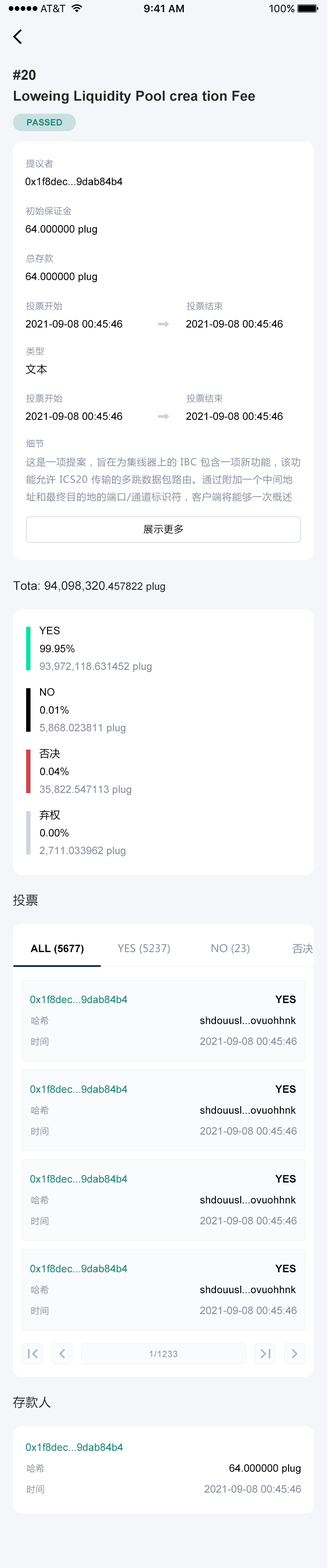
<style>
.page{position:relative;width:327px;height:1568px;background:#ffffff}
.page>*{position:absolute;margin:0}
.t1{font:13.9px/20.9px "Arial-BoldMT";color:#272727}
.t2{font:8.7px "Arial-BoldMT";color:#158878}
.t3{font:8.7px "MicrosoftYaHei";letter-spacing:0.05em;color:#878e9f}
.t4{font:10.5px "ArialMT";color:#000000}
.t5{font:10.5px "MicrosoftYaHei";letter-spacing:0.05em;color:#000000}
.t6{font:9.6px/17.4px "MicrosoftYaHei";letter-spacing:0.05em;color:#878e9f}
.t7{font:9.6px "MicrosoftYaHei";letter-spacing:0.05em;color:#000000}
.t8{font:12.2px "ArialMT";color:#272727}
.t9{font:10.5px "ArialMT";color:#272727}
.t10{font:10.5px "ArialMT";color:#878e9f}
.t11{font:10.5px "MicrosoftYaHei";color:#000000}
.t12{font:12.2px "MicrosoftYaHei";letter-spacing:0.05em;color:#272727}
.t13{font:10.5px "Arial-BoldMT";color:#000000}
.t14{font:10.5px "MicrosoftYaHei";color:#878e9f}
.t15{font:10.5px "ArialMT";color:#158878}
.t16{font:8.7px "ArialMT";letter-spacing:0.05em;color:#878e9f}
</style>
<div class="page">
<p class="t1" style="left:13px;top:70px;width:242px;height:34px">#20 <br>Loweing Liquidity Pool crea tion Fee</p>
<p class="t2" style="left:27px;top:119px;width:35px;height:7px">PASSED</p>
<p class="t3" style="left:26px;top:159px;width:27px;height:9px">提议者</p>
<p class="t4" style="left:25px;top:177px;width:97px;height:9px">0x1f8dec...9dab84b4</p>
<p class="t3" style="left:26px;top:206px;width:45px;height:9px">初始保证金</p>
<p class="t4" style="left:26px;top:225px;width:71px;height:10px">64.000000 plug</p>
<p class="t3" style="left:26px;top:254px;width:27px;height:9px">总存款</p>
<p class="t4" style="left:26px;top:272px;width:71px;height:10px">64.000000 plug</p>
<p class="t3" style="left:26px;top:301px;width:36px;height:10px">投票开始</p>
<p class="t3" style="left:186px;top:301px;width:37px;height:10px">投票结束</p>
<p class="t4" style="left:26px;top:320px;width:96px;height:8px">2021-09-08 00:45:46</p>
<p class="t4" style="left:186px;top:320px;width:97px;height:8px">2021-09-08 00:45:46</p>
<p class="t3" style="left:26px;top:347px;width:18px;height:8px">类型</p>
<p class="t5" style="left:26px;top:364px;width:21px;height:11px">文本</p>
<p class="t3" style="left:26px;top:394px;width:36px;height:9px">投票开始</p>
<p class="t3" style="left:186px;top:394px;width:37px;height:9px">投票结束</p>
<p class="t4" style="left:26px;top:412px;width:96px;height:8px">2021-09-08 00:45:46</p>
<p class="t4" style="left:186px;top:412px;width:97px;height:8px">2021-09-08 00:45:46</p>
<p class="t3" style="left:26px;top:439px;width:18px;height:9px">细节</p>
<p class="t6" style="left:26px;top:457px;width:274px;height:45px">这是一项提案，旨在为集线器上的 IBC 包含一项新功能，该功能允许 ICS20 传输的多跳数据包路由。通过附加一个中间地址和最终目的地的端口/通道标识符，客户端将能够一次概述多个传输。</p>
<p class="t7" style="left:143px;top:524px;width:40px;height:10px">展示更多</p>
<p class="t8" style="left:13px;top:581px;width:152px;height:11px">Tota: 94,098,320<span class="t9">.457822 plug</span></p>
<p class="t4" style="left:39px;top:626px;width:21px;height:9px">YES</p>
<p class="t4" style="left:40px;top:645px;width:34px;height:7px">99.95%</p>
<p class="t10" style="left:40px;top:662px;width:112px;height:10px">93,972,118.631452 plug</p>
<p class="t4" style="left:40px;top:688px;width:14px;height:8px">NO</p>
<p class="t4" style="left:40px;top:706px;width:29px;height:8px">0.01%</p>
<p class="t10" style="left:40px;top:723px;width:85px;height:10px">5,868.023811 plug</p>
<p class="t11" style="left:39px;top:748px;width:21px;height:11px">否决</p>
<p class="t4" style="left:40px;top:767px;width:29px;height:8px">0.04%</p>
<p class="t10" style="left:40px;top:785px;width:91px;height:10px">35,822.547113 plug</p>
<p class="t11" style="left:39px;top:810px;width:21px;height:10px">弃权</p>
<p class="t4" style="left:40px;top:829px;width:29px;height:8px">0.00%</p>
<p class="t10" style="left:40px;top:846px;width:85px;height:10px">2,711.033962 plug</p>
<p class="t12" style="left:13px;top:894px;width:25px;height:12px">投票</p>
<p class="t13" style="left:30px;top:944px;width:54px;height:10px">ALL (5677)</p>
<p class="t14" style="left:118px;top:944px;width:52px;height:10px">YES (5237)</p>
<p class="t14" style="left:211px;top:944px;width:38px;height:10px">NO (23)</p>
<p class="t14" style="left:292px;top:943px;width:21px;height:11px">否决</p>
<p class="t15" style="left:30px;top:995px;width:97px;height:9px">0x1f8dec...9dab84b4</p>
<p class="t13" style="left:275px;top:995px;width:21px;height:9px">YES</p>
<p class="t3" style="left:31px;top:1016px;width:18px;height:9px">哈希</p>
<p class="t4" style="left:200px;top:1016px;width:96px;height:8px">shdouusl...ovuohhnk</p>
<p class="t3" style="left:31px;top:1037px;width:17px;height:9px">时间</p>
<p class="t10" style="left:200px;top:1037px;width:97px;height:8px">2021-09-08 00:45:46</p>
<p class="t15" style="left:30px;top:1085px;width:97px;height:8px">0x1f8dec...9dab84b4</p>
<p class="t13" style="left:275px;top:1085px;width:21px;height:8px">YES</p>
<p class="t3" style="left:31px;top:1106px;width:18px;height:9px">哈希</p>
<p class="t4" style="left:200px;top:1106px;width:96px;height:8px">shdouusl...ovuohhnk</p>
<p class="t3" style="left:31px;top:1127px;width:17px;height:8px">时间</p>
<p class="t10" style="left:200px;top:1127px;width:97px;height:8px">2021-09-08 00:45:46</p>
<p class="t15" style="left:30px;top:1175px;width:97px;height:8px">0x1f8dec...9dab84b4</p>
<p class="t13" style="left:275px;top:1175px;width:21px;height:8px">YES</p>
<p class="t3" style="left:31px;top:1196px;width:18px;height:8px">哈希</p>
<p class="t4" style="left:200px;top:1196px;width:96px;height:8px">shdouusl...ovuohhnk</p>
<p class="t3" style="left:31px;top:1217px;width:17px;height:8px">时间</p>
<p class="t10" style="left:200px;top:1217px;width:97px;height:8px">2021-09-08 00:45:46</p>
<p class="t15" style="left:30px;top:1264px;width:97px;height:9px">0x1f8dec...9dab84b4</p>
<p class="t13" style="left:275px;top:1264px;width:21px;height:9px">YES</p>
<p class="t3" style="left:31px;top:1285px;width:18px;height:9px">哈希</p>
<p class="t4" style="left:200px;top:1285px;width:96px;height:9px">shdouusl...ovuohhnk</p>
<p class="t3" style="left:31px;top:1306px;width:17px;height:9px">时间</p>
<p class="t10" style="left:200px;top:1306px;width:97px;height:9px">2021-09-08 00:45:46</p>
<p class="t16" style="left:149px;top:1351px;width:28px;height:6px">1/1233</p>
<p class="t12" style="left:13px;top:1396px;width:38px;height:12px">存款人</p>
<p class="t15" style="left:26px;top:1443px;width:97px;height:8px">0x1f8dec...9dab84b4</p>
<p class="t3" style="left:27px;top:1464px;width:17px;height:9px">哈希</p>
<p class="t4" style="left:229px;top:1464px;width:72px;height:10px">64.000000 plug</p>
<p class="t3" style="left:27px;top:1485px;width:17px;height:9px">时间</p>
<p class="t10" style="left:204px;top:1485px;width:97px;height:8px">2021-09-08 00:45:46</p>
</div>
